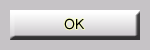
<style>
.page{position:relative;width:150px;height:50px;background:#c6c3c6}
.page>*{position:absolute;margin:0}
.t1{font:14px "ArialMT";color:#000000}
</style>
<div class="page">
<p class="t1" style="left:64px;top:18px;width:21px;height:12px">OK</p>
</div>
